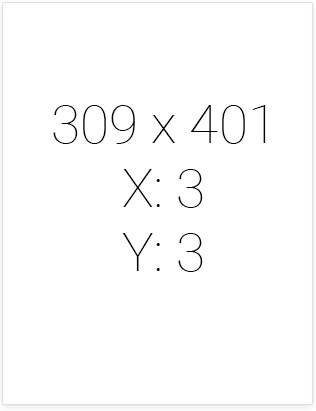
<style>
.page{position:relative;width:316px;height:411px;background:#ffffff}
.page>*{position:absolute;margin:0}
.t1{font:53.3px "Roboto-Thin";color:#000000}
</style>
<div class="page">
<p class="t1" style="left:53px;top:105px;width:213px;height:167px;text-align:center">309 x 401<br>X: 3<br>Y: 3</p>
</div>
